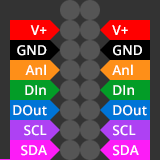
<style>
.page{position:relative;width:160px;height:160px;background:#333333}
.page>*{position:absolute;margin:0}
.t1{font:13.6px/20px "OpenSans-Semibold";color:#ffffff}
</style>
<div class="page">
<p class="t1" style="left:13px;top:25px;width:34px;height:131px;text-align:right">V+<br>GND<br>Anl<br>DIn<br>DOut<br>SCL<br>SDA</p>
<p class="t1" style="left:112px;top:25px;width:35px;height:131px">V+<br>GND<br>Anl<br>DIn<br>DOut<br>SCL<br>SDA</p>
</div>
